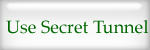
<style>
.page{position:relative;width:150px;height:50px}
.page>*{position:absolute;margin:0}
.t1{font:18px "PalatinoLinotype-Roman";color:#006600}
</style>
<div class="page">
<p class="t1" style="left:6px;top:20px;width:143px;height:14px">Use Secret Tunnel</p>
</div>
